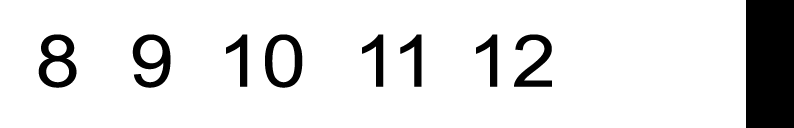
<style>
.page{position:relative;width:794px;height:128px;background:#ffffff}
.page>*{position:absolute;margin:0}
.t1{font:124.4px "ArialMT";color:#000000;scale:1.1 1}
</style>
<div class="page">
<p class="t1" style="left:38px;top:34px;width:39px;height:54px">8</p>
<p class="t1" style="left:132px;top:34px;width:39px;height:54px">9</p>
<p class="t1" style="left:226px;top:34px;width:77px;height:54px">10</p>
<p class="t1" style="left:362px;top:34px;width:60px;height:53px">11</p>
<p class="t1" style="left:476px;top:34px;width:76px;height:53px">12</p>
</div>
